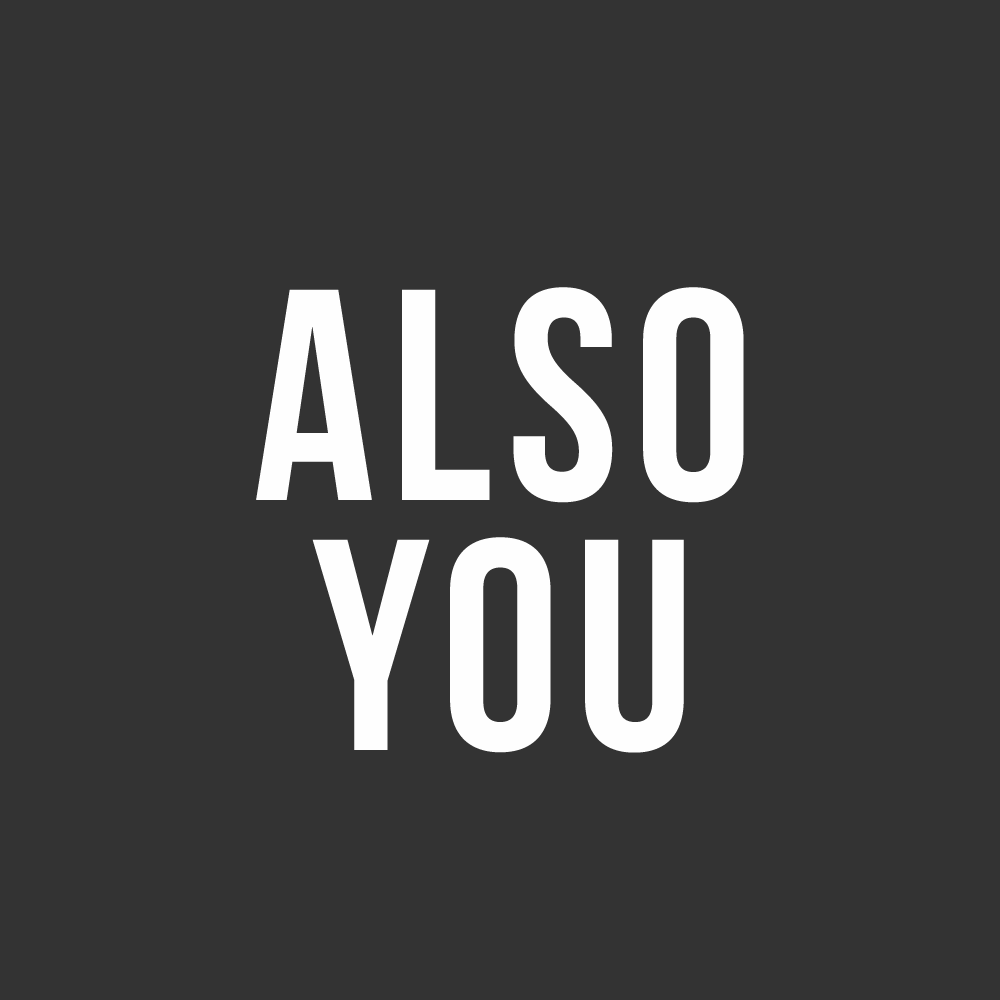
<style>
.page{position:relative;width:1000px;height:1000px;background:#333333}
.page>*{position:absolute;margin:0}
.t1{font:300px/250px "BebasNeue";letter-spacing:0.05em;color:#fefefe}
</style>
<div class="page">
<p class="t1" style="left:256px;top:287px;width:488px;height:466px;text-align:center">also<br>you</p>
</div>
